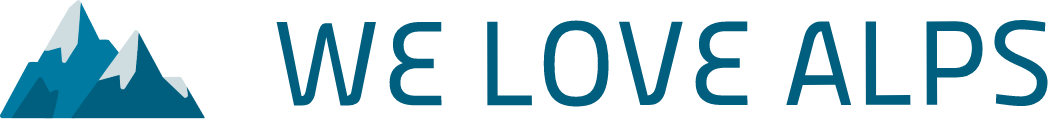
<style>
.page{position:relative;width:1048px;height:119px;background:#ffffff}
.page>*{position:absolute;margin:0}
.t1{font:120px "Panefresco500wt-Regular";color:#005f7e}
</style>
<div class="page">
<p class="t1" style="left:276px;top:19px;width:772px;height:88px">WE LOVE ALPS</p>
</div>
